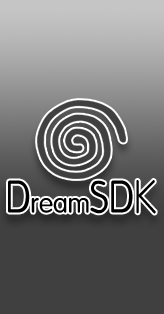
<style>
.page{position:relative;width:164px;height:314px;background:#404040}
.page>*{position:absolute;margin:0}
.t1{font:33.3px "Dreamcast";letter-spacing:-0.01em;color:#000000}
</style>
<div class="page">
<p class="t1" style="left:8px;top:180px;width:148px;height:34px">DreamSDK</p>
</div>
